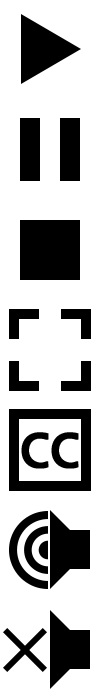
<style>
.page{position:relative;width:100px;height:700px;background:#ffffff}
.page>*{position:absolute;margin:0}
.t1{font:45px "NanumGothicExtraBold";letter-spacing:-0.02em;color:#000000;font-weight:bold}
</style>
<div class="page">
<p class="t1" style="left:21px;top:432px;width:58px;height:37px">CC</p>
</div>
